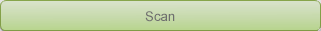
<style>
.page{position:relative;width:321px;height:31px}
.page>*{position:absolute;margin:0}
.t1{font:13.3px "ArialMT";color:#6e6e6e}
</style>
<div class="page">
<p class="t1" style="left:145px;top:11px;width:30px;height:11px">Scan</p>
</div>
